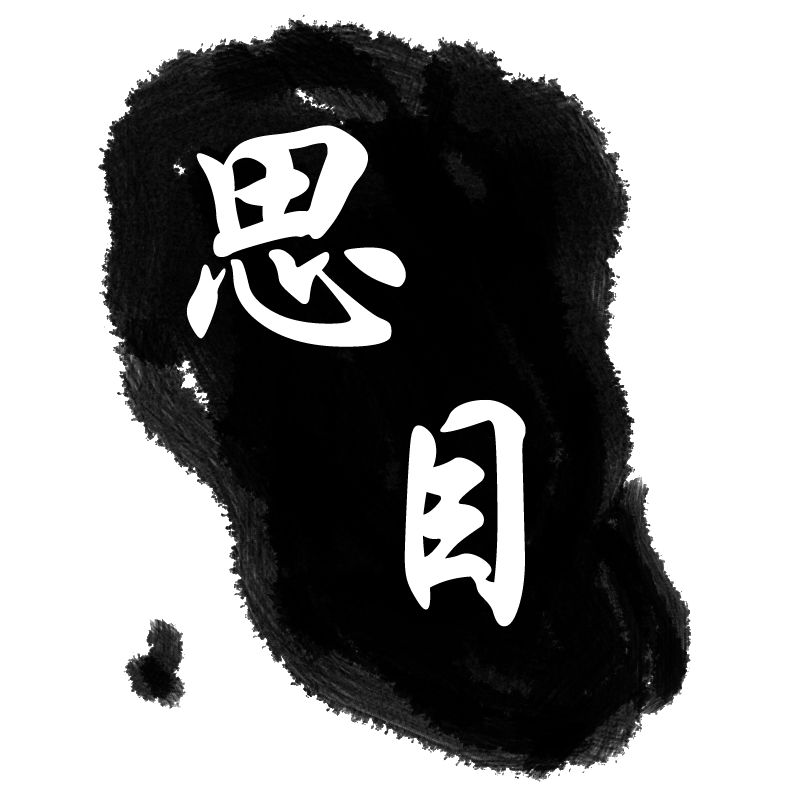
<style>
.page{position:relative;width:800px;height:800px;background:#ffffff}
.page>*{position:absolute;margin:0}
.t1{font:300px "STXingkai";color:#ffffff}
</style>
<div class="page">
<p class="t1" style="left:186px;top:125px;width:220px;height:222px">思</p>
<p class="t1" style="left:404px;top:399px;width:122px;height:228px">目</p>
</div>
